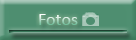
<style>
.page{position:relative;width:136px;height:40px;background:#4e8e70}
.page>*{position:absolute;margin:0}
.t1{font:18px "Calibri"}
</style>
<div class="page">
<p class="t1" style="left:39px;top:14px;width:39px;height:11px">Fotos</p>
</div>
